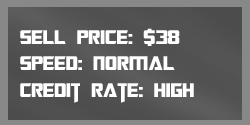
<style>
.page{position:relative;width:250px;height:125px}
.page>*{position:absolute;margin:0}
.t1{font:22px "TransformersMovie";color:#ffffff}
.t2{font:22px "TransformersMovie";letter-spacing:0.02em;color:#ffffff}
</style>
<div class="page">
<p class="t1" style="left:20px;top:28px;width:174px;height:75px">sell p<span class="t2">ri</span>ce: $38<br>spee<span class="t2">d</span>: <span class="t2">normal<br></span>credit rate: <span class="t2">high</span></p>
</div>
